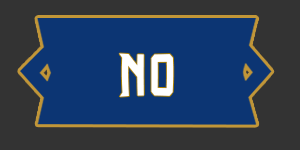
<style>
.page{position:relative;width:300px;height:150px;background:#0c3573}
.page>*{position:absolute;margin:0}
.t1{font:62.5px "Lorde-Havana";letter-spacing:0.1em;color:#ffffff;scale:0.75 1}
</style>
<div class="page">
<p class="t1" style="left:119px;top:53px;width:55px;height:44px">NO</p>
</div>
